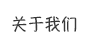
<style>
.page{position:relative;width:90px;height:45px;background:#ffffff}
.page>*{position:absolute;margin:0}
.t1{font:16.7px "HannotateSC-W7";color:#383838}
</style>
<div class="page">
<p class="t1" style="left:12px;top:16px;width:65px;height:16px">关于我们</p>
</div>
